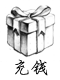
<style>
.page{position:relative;width:60px;height:80px;background:#ffffff}
.page>*{position:absolute;margin:0}
.t1{font:18px "STXingkaiSC-Light";letter-spacing:0.055em;color:#000000}
</style>
<div class="page">
<p class="t1" style="left:15px;top:59px;width:33px;height:17px">充钱</p>
</div>
